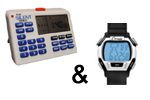
<style>
.page{position:relative;width:150px;height:100px;background:#ffffff}
.page>*{position:absolute;margin:0}
.t1{font:25px "ArialMT";color:#000000;font-weight:bold}
</style>
<div class="page">
<p class="t1" style="left:72px;top:64px;width:16px;height:20px">&amp;</p>
</div>
